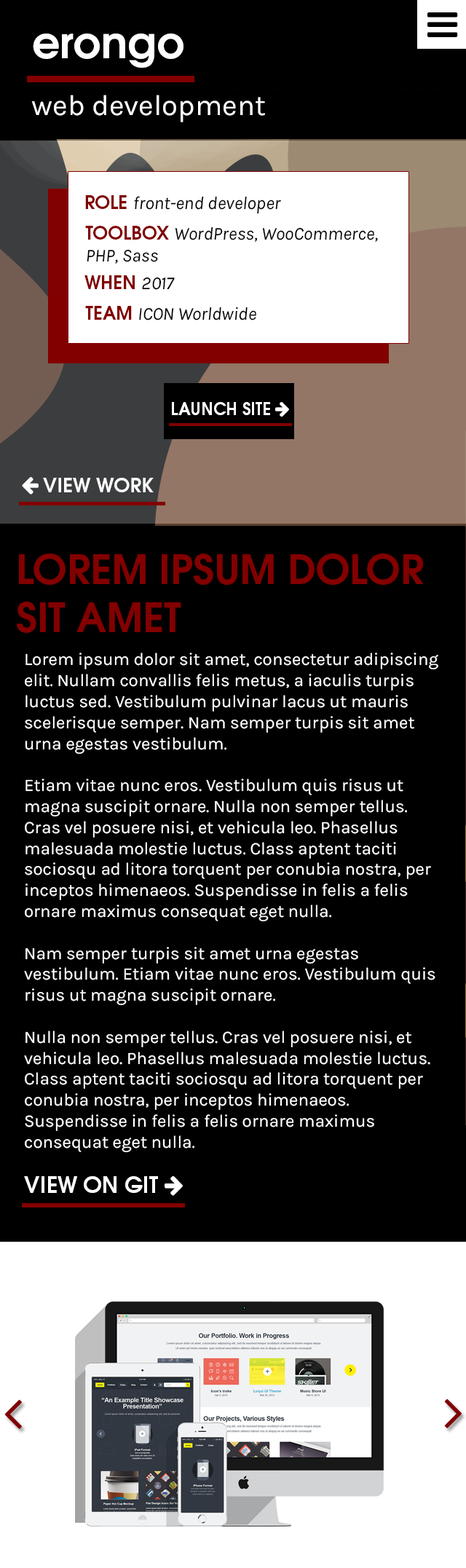
<style>
.page{position:relative;width:466px;height:1568px;background:#000000}
.page>*{position:absolute;margin:0}
.t1{font:43.7px "TeXGyreAdventor-Bold";color:#ffffff}
.t2{font:29.1px "Karla-Regular";color:#ffffff}
.t3{font:18.1px "Karla-Italic";color:#000000}
.t4{font:18.1px "TeXGyreAdventor-Bold";color:#820000}
.t5{font:40.2px "TeXGyreAdventor-Bold";color:#820000}
.t6{font:17.5px "Karla-Regular";color:#ffffff}
</style>
<div class="page">
<p class="t1" style="left:33px;top:34px;width:151px;height:34px">erongo</p>
<p class="t2" style="left:31px;top:95px;width:234px;height:27px">web development</p>
<p class="t3" style="left:85px;top:195px;width:196px;height:19px"><span class="t4">ROLE </span>front-end developer</p>
<p class="t3" style="left:85px;top:226px;width:293px;height:38px"><span class="t4">TOOLBOX </span>WordPress, WooCommerce,<br>PHP, Sass</p>
<p class="t4" style="left:84px;top:275px;width:91px;height:15px">WHEN <span class="t3">2017</span></p>
<p class="t3" style="left:85px;top:306px;width:171px;height:14px"><span class="t4">TEAM </span>ICON Worldwide</p>
<p class="t5" style="left:16px;top:553px;width:408px;height:80px">LOREM IPSUM DOLOR <br>SIT AMET</p>
<p class="t6" style="left:24px;top:653px;width:414px;height:500px">Lorem ipsum dolor sit amet, consectetur adipiscing elit. Nullam convallis felis metus, a iaculis turpis luctus sed. Vestibulum pulvinar lacus ut mauris scelerisque semper. Nam semper turpis sit amet urna egestas vestibulum. <br><br>Etiam vitae nunc eros. Vestibulum quis risus ut magna suscipit ornare. Nulla non semper tellus. Cras vel posuere nisi, et vehicula leo. Phasellus malesuada molestie luctus. Class aptent taciti sociosqu ad litora torquent per conubia nostra, per inceptos himenaeos. Suspendisse in felis a felis ornare maximus consequat eget nulla.<br><br>Nam semper turpis sit amet urna egestas vestibulum. Etiam vitae nunc eros. Vestibulum quis risus ut magna suscipit ornare. <br><br>Nulla non semper tellus. Cras vel posuere nisi, et vehicula leo. Phasellus malesuada molestie luctus. Class aptent taciti sociosqu ad litora torquent per conubia nostra, per inceptos himenaeos. Suspendisse in felis a felis ornare maximus consequat eget nulla.</p>
</div>
